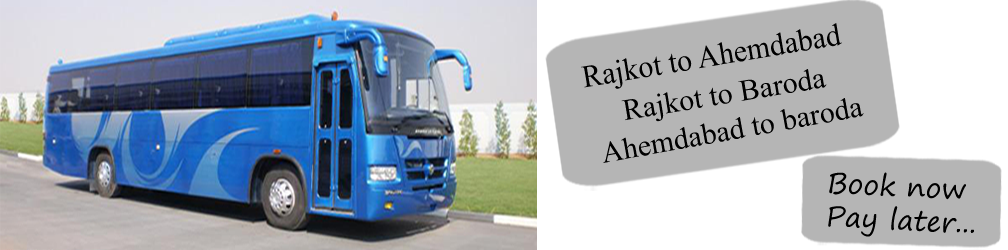
<style>
.page{position:relative;width:1008px;height:250px;background:#b5b5b5}
.page>*{position:absolute;margin:0}
.t1{font:31.5px "TimesNewRomanPSMT";color:#000000;scale:0.95 1}
.t2{font:30px "TimesNewRomanPSMT";color:#000000}
.t3{font:28px "SegoePrint";color:#000000}
</style>
<div class="page">
<p class="t1" style="left:581px;top:23px;width:261px;height:66px;rotate:-9deg">Rajkot to Ahemdabad</p>
<p class="t2" style="left:621px;top:69px;width:206px;height:53px;rotate:-9deg">Rajkot to Baroda</p>
<p class="t2" style="left:603px;top:98px;width:261px;height:65px;rotate:-10deg">Ahemdabad to baroda</p>
<p class="t3" style="left:828px;top:172px;width:146px;height:65px;rotate:3deg">Book now<br>Pay later...</p>
</div>
